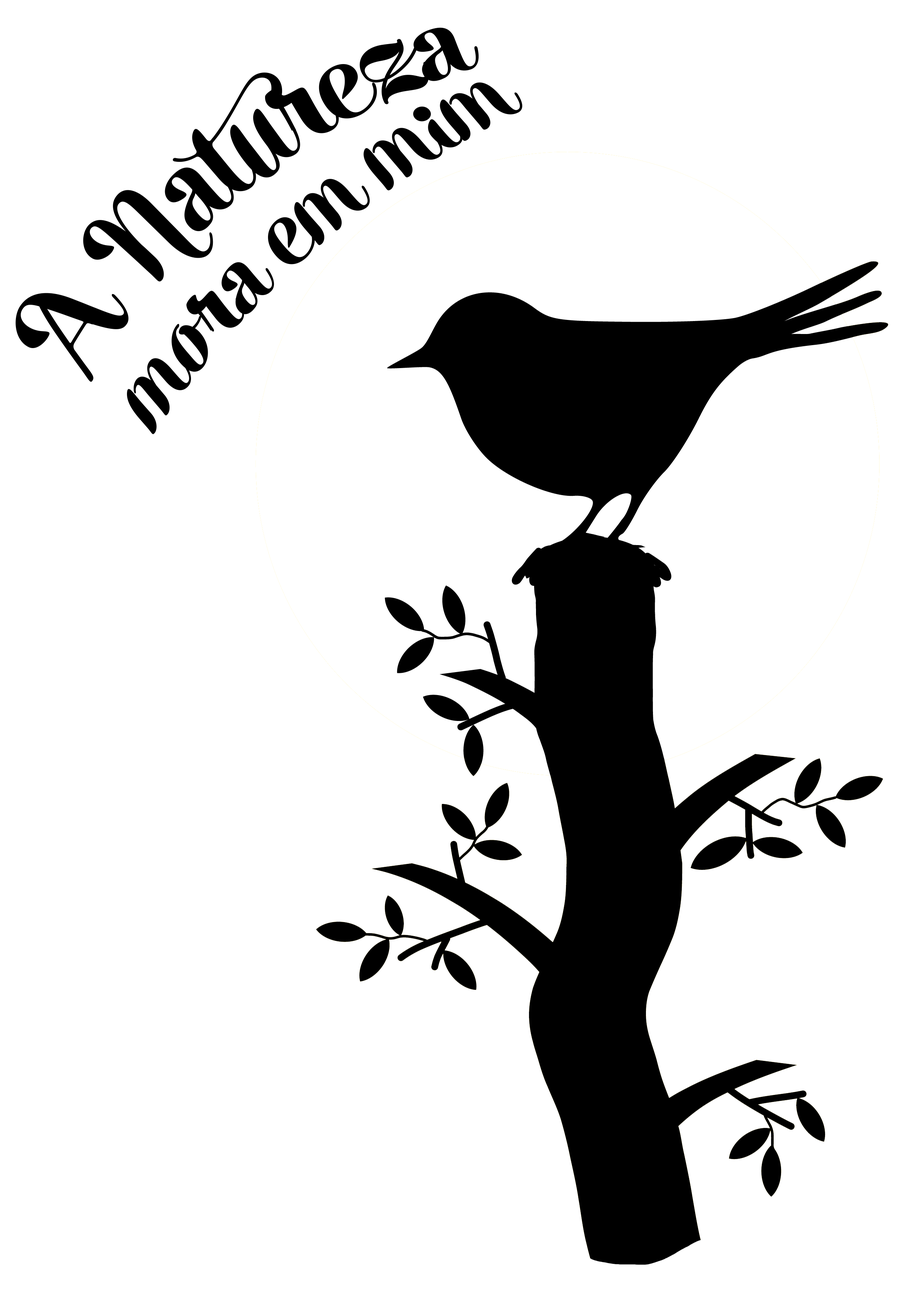
<style>
.page{position:relative;width:918px;height:1299px;background:#ffffff}
.page>*{position:absolute;margin:0}
.t1{font:153.2px "AlekBold";color:#000000}
.t2{font:128.4px "AlekBold";color:#000000}
</style>
<div class="page">
<p class="t1" style="left:16px;top:27px;width:463px;height:355px;rotate:-38deg">A Natureza</p>
<p class="t2" style="left:127px;top:82px;width:395px;height:352px;rotate:-41deg">mora em mim</p>
</div>
